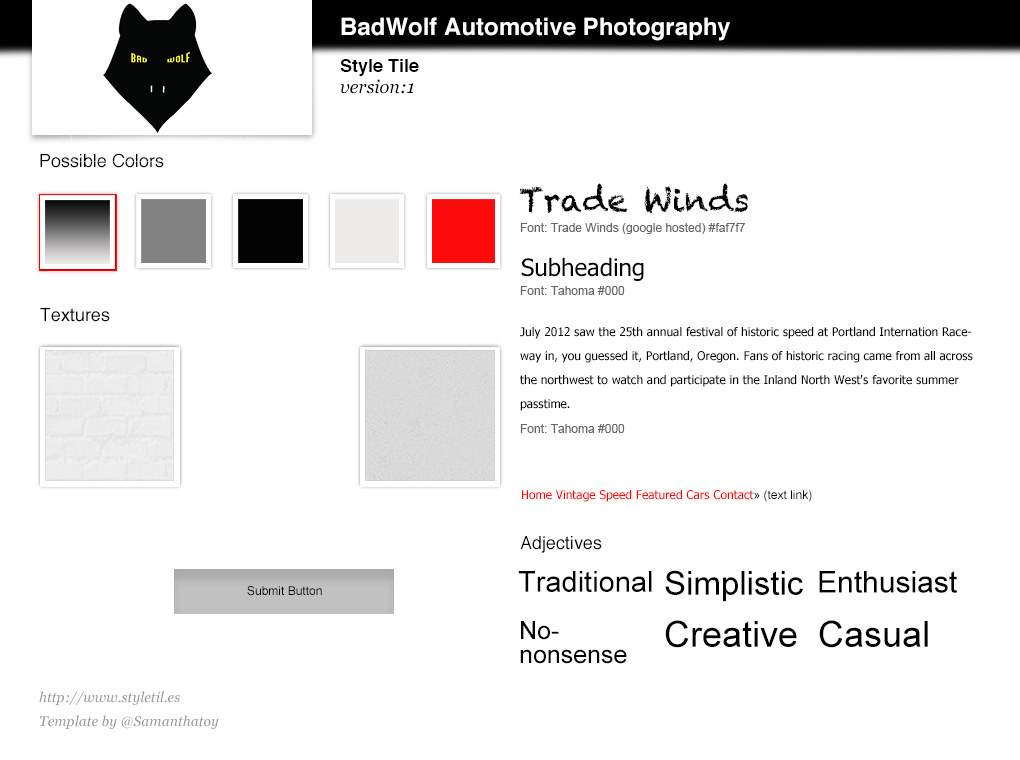
<style>
.page{position:relative;width:1020px;height:760px;background:#ffffff}
.page>*{position:absolute;margin:0}
.t1{font:24px "Helvetica-Bold";color:#ffffff}
.t2{font:18px "Helvetica-Bold";color:#000000}
.t3{font:18px "Georgia-Italic";color:#000000}
.t4{font:18px "Helvetica";color:#000000}
.t5{font:32px "Chalkduster";color:#000000}
.t6{font:12px "ArialMT";color:#666666}
.t7{font:24px "Tahoma";color:#000000}
.t8{font:12px/24px "Tahoma";color:#000000}
.t9{font:12px "Tahoma";color:#fb0202}
.t10{font:12px "ArialMT";color:#000000}
.t11{font:29px "ArialMT";color:#000000}
.t12{font:33px "ArialMT";color:#000000}
.t13{font:30px "ArialMT";color:#000000}
.t14{font:12px "ArialMT";color:#030303}
.t15{font:25px/24px "ArialMT";color:#000000}
.t16{font:36px "ArialMT";color:#000000}
.t17{font:14px/24px "Georgia-Italic";color:#999999}
</style>
<div class="page">
<p class="t1" style="left:341px;top:17px;width:389px;height:24px">BadWolf Automotive Photography</p>
<p class="t2" style="left:340px;top:59px;width:79px;height:17px">Style Tile</p>
<p class="t3" style="left:340px;top:79px;width:74px;height:15px">version:1</p>
<p class="t4" style="left:40px;top:153px;width:124px;height:15px">Possible Colors</p>
<p class="t5" style="left:519px;top:183px;width:229px;height:31px">Trade Winds</p>
<p class="t6" style="left:520px;top:223px;width:225px;height:11px">Font: Trade Winds (google hosted) #faf7f7</p>
<p class="t7" style="left:521px;top:257px;width:123px;height:24px">Subheading</p>
<p class="t6" style="left:520px;top:286px;width:105px;height:9px">Font: Tahoma #000</p>
<p class="t4" style="left:40px;top:308px;width:70px;height:14px">Textures</p>
<p class="t8" style="left:520px;top:327px;width:453px;height:84px">July 2012 saw the 25th annual festival of historic speed at Portland Internation Raceway in, you guessed it, Portland, Oregon. Fans of historic racing came from all across the northwest to watch and participate in the Inland North West's favorite summer passtime.</p>
<p class="t6" style="left:520px;top:424px;width:105px;height:9px">Font: Tahoma #000</p>
<p class="t9" style="left:522px;top:490px;width:290px;height:12px">Home Vintage Speed Featured Cars Contact<span class="t10">» (text link)</span></p>
<p class="t4" style="left:520px;top:536px;width:82px;height:17px">Adjectives</p>
<p class="t11" style="left:518px;top:571px;width:134px;height:21px">Traditional</p>
<p class="t12" style="left:665px;top:570px;width:138px;height:32px">Simplistic</p>
<p class="t13" style="left:819px;top:571px;width:138px;height:22px">Enthusiast</p>
<p class="t14" style="left:247px;top:586px;width:75px;height:10px">Submit Button</p>
<p class="t15" style="left:520px;top:621px;width:107px;height:43px">No-nonsense</p>
<p class="t16" style="left:665px;top:620px;width:132px;height:28px">Creative</p>
<p class="t16" style="left:819px;top:620px;width:109px;height:28px">Casual</p>
<p class="t17" style="left:39px;top:691px;width:180px;height:38px">http://www.styletil.es<br>Template by @Samanthatoy</p>
</div>
